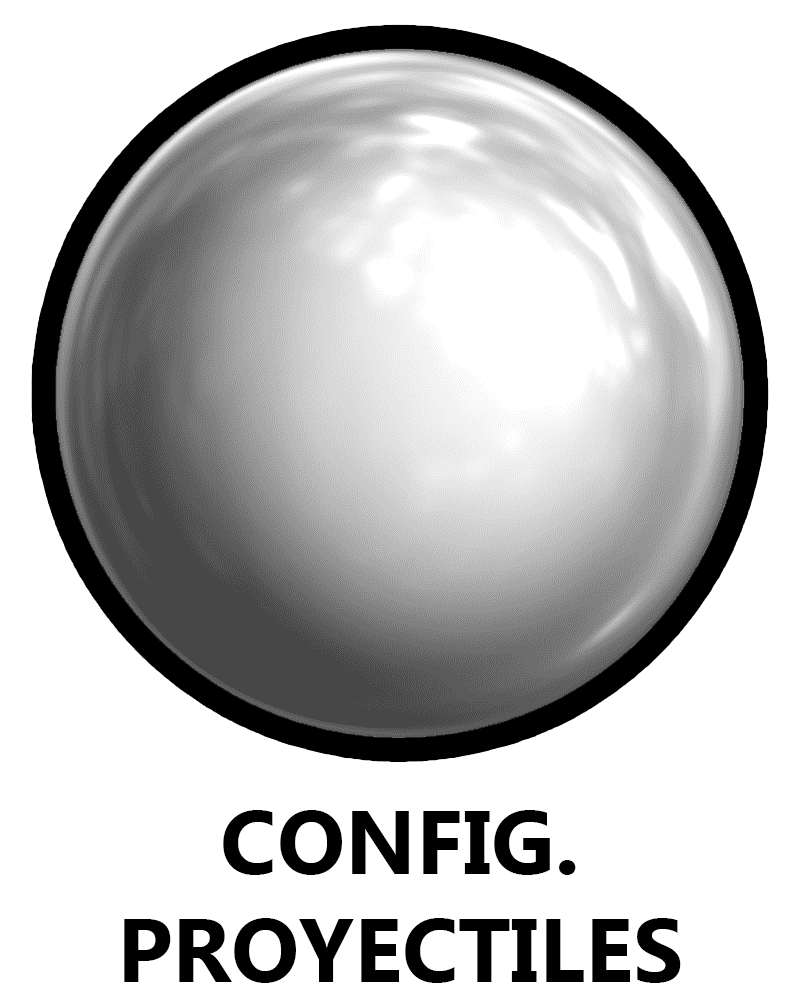
<style>
.page{position:relative;width:800px;height:1000px;background:#ffffff}
.page>*{position:absolute;margin:0}
.t1{font:90px "MicrosoftNewTaiLue-Bold";color:#000000}
</style>
<div class="page">
<p class="t1" style="left:124px;top:810px;width:557px;height:173px;text-align:center">CONFIG.<br>PROYECTILES</p>
</div>
